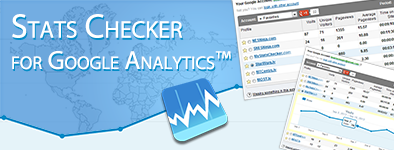
<style>
.page{position:relative;width:394px;height:150px}
.page>*{position:absolute;margin:0}
.t1{font:26.2px "MyriadPro-Regular";color:#ffffff;font-variant:small-caps}
.t2{font:34.1px "MyriadPro-Regular";color:#ffffff;font-variant:small-caps}
</style>
<div class="page">
<p class="t1" style="left:12px;top:14px;width:219px;height:56px"><span class="t2">Stats Checker<br></span>for Google Analytics™</p>
</div>
